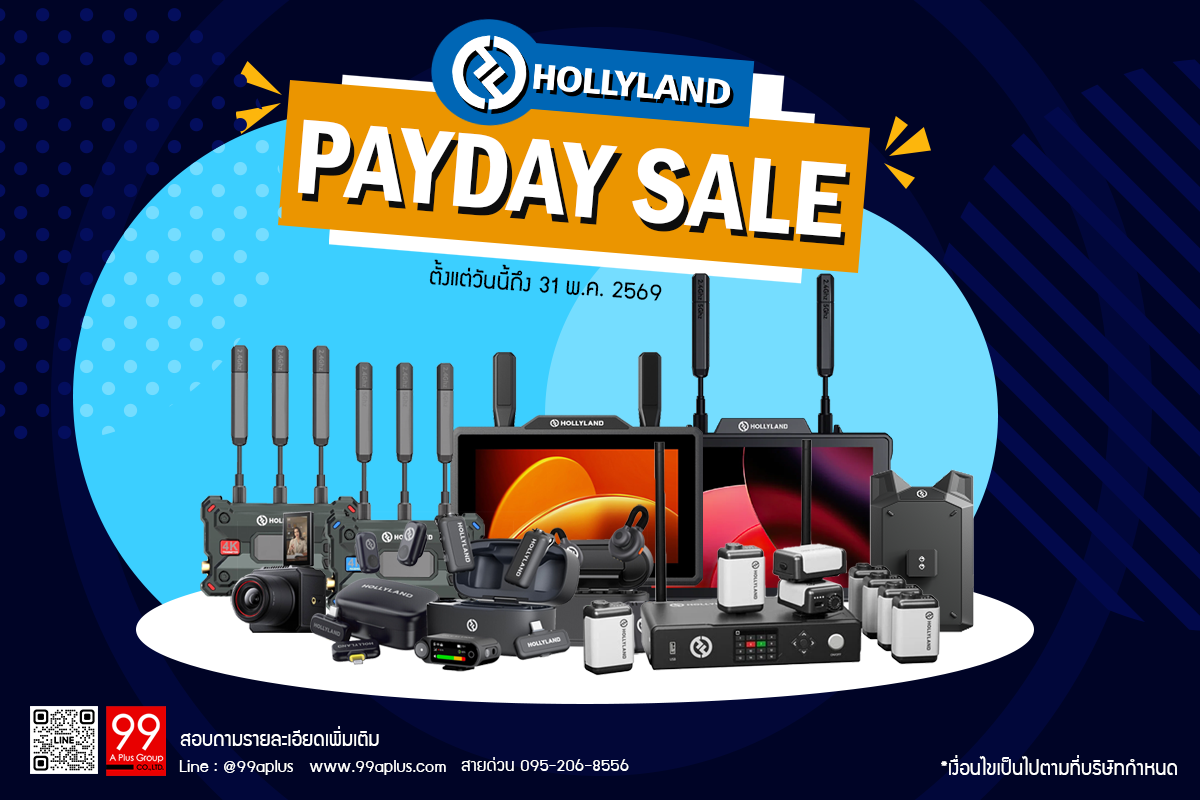
<style>
.page{position:relative;width:1200px;height:800px;background:#000426}
.page>*{position:absolute;margin:0}
.t1{font:109.7px "FranklinGothic-DemiCond";color:#ffffff}
.t2{font:109.7px "FranklinGothic-DemiCond"}
.t3{font:26.1px "supermarket";color:#000000}
.t4{font:22.4px "supermarket";color:#ffffff}
.t5{font:19.4px "supermarket";color:#ffffff}
</style>
<div class="page">
<p class="t1" style="left:297px;top:119px;width:550px;height:119px;rotate:5deg">PAYDAY SALE</p>
<p class="t2" style="left:301px;top:127px;width:550px;height:119px;rotate:5deg">PAYDAY SALE</p>
<p class="t3" style="left:429px;top:259px;width:233px;height:42px;rotate:4deg">ตั้งแต่วันนี้ถึง 31 พ.ค. 2569</p>
<p class="t4" style="left:180px;top:726px;width:199px;height:20px">สอบถามรายละเอียดเพิ่มเติม</p>
<p class="t5" style="left:179px;top:760px;width:267px;height:15px">Line : @99aplus   www.99aplus.com</p>
<p class="t5" style="left:461px;top:757px;width:168px;height:14px">สายด่วน 095-206-8556</p>
<p class="t4" style="left:941px;top:755px;width:236px;height:20px">*เงื่อนไขเป็นไปตามที่บริษัทกำหนด</p>
</div>
